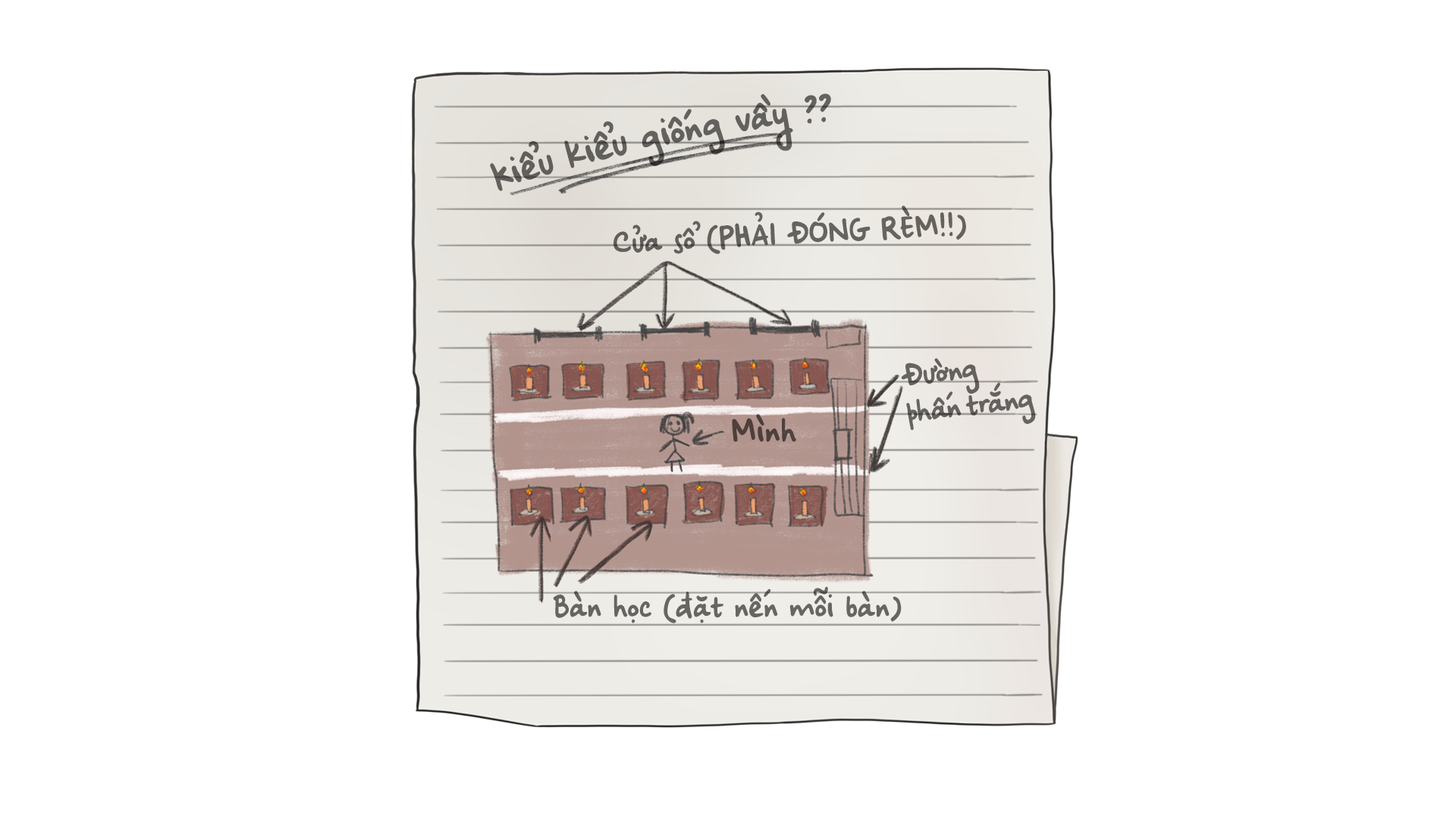
<style>
.page{position:relative;width:1456px;height:819px;background:#ffffff}
.page>*{position:absolute;margin:0}
.t1{font:36.4px "iCielBeCool-Regular";letter-spacing:-0.02em;color:#6e6d6c}
.t2{font:30.3px "iCielBeCool-Regular";letter-spacing:-0.02em;color:#6e6d6c}
.t3{font:32.4px "iCielBeCool-Regular";letter-spacing:-0.02em;color:#4d3f3c}
</style>
<div class="page">
<p class="t1" style="left:490px;top:93px;width:341px;height:98px;rotate:-12deg">Kiểu kiểu giống vầy ??</p>
<p class="t2" style="left:613px;top:206px;width:353px;height:48px;rotate:-3deg">Cửa sổ (PHẢI ĐÓNG RÈM!!)</p>
<p class="t2" style="left:901px;top:358px;width:135px;height:72px;rotate:-7deg">Đường<br>phấn trắng</p>
<p class="t3" style="left:732px;top:414px;width:64px;height:28px">Mình</p>
<p class="t2" style="left:553px;top:586px;width:349px;height:37px">Bàn học (đặt nến mỗi bàn)</p>
</div>
